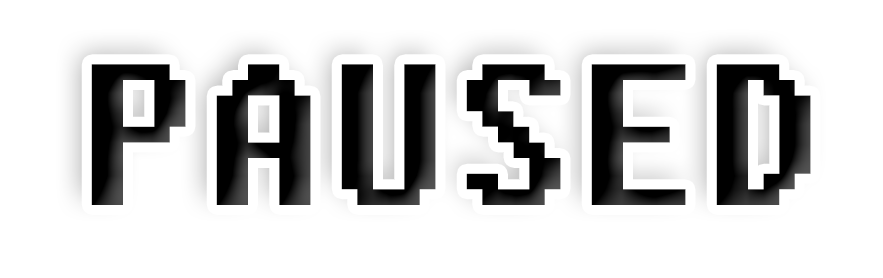
<style>
.page{position:relative;width:883px;height:278px;background:#ffffff}
.page>*{position:absolute;margin:0}
.t1{font:200px "Fixedsys";color:#000000}
</style>
<div class="page">
<p class="t1" style="left:91px;top:64px;width:720px;height:141px">PAUSED</p>
</div>
